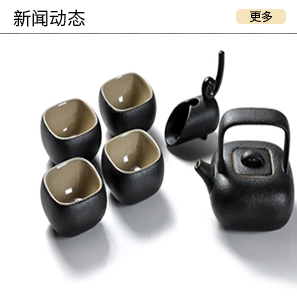
<style>
.page{position:relative;width:297px;height:300px;background:#ffffff}
.page>*{position:absolute;margin:0}
.t1{font:18px "HiraginoSansGB-W3";color:#040404}
.t2{font:12px "HiraginoSansGB-W3";color:#040404}
</style>
<div class="page">
<p class="t1" style="left:13px;top:9px;width:72px;height:18px">新闻动态</p>
<p class="t2" style="left:250px;top:11px;width:23px;height:12px">更多</p>
</div>
